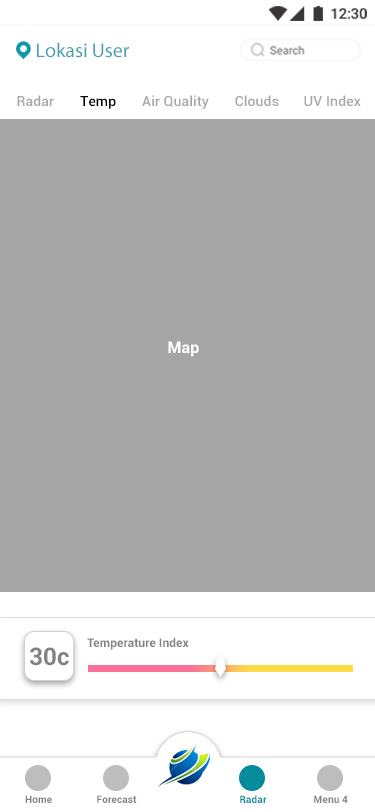
<style>
.page{position:relative;width:375px;height:812px;background:#a5a5a5}
.page>*{position:absolute;margin:0}
.t1{font:20px "MyriadPro-Regular";color:#4aa1ae}
.t2{font:14px "Roboto-Medium";letter-spacing:0.01em;color:#a7a7a7}
.t3{font:14px "Roboto-Medium";letter-spacing:0.01em;color:#000000}
.t4{font:16px "Roboto-Bold";letter-spacing:0.005em;color:#ffffff}
.t5{font:12px "Roboto-Bold";letter-spacing:0.005em;color:#828282}
.t6{font:24.1px "Roboto-Bold";letter-spacing:0.005em;color:#828282}
.t7{font:10px "Roboto-Bold";letter-spacing:0.005em;color:#828282}
.t8{font:10px "Roboto-Bold";letter-spacing:0.005em;color:#088a9d}
</style>
<div class="page">
<p class="t1" style="left:37px;top:42px;width:92px;height:16px">Lokasi User</p>
<p class="t2" style="left:17px;top:95px;width:37px;height:12px">Radar</p>
<p class="t3" style="left:80px;top:96px;width:36px;height:13px">Temp</p>
<p class="t2" style="left:142px;top:95px;width:67px;height:14px">Air Quality</p>
<p class="t2" style="left:235px;top:95px;width:44px;height:12px">Clouds</p>
<p class="t2" style="left:304px;top:95px;width:57px;height:11px">UV Index</p>
<p class="t4" style="left:168px;top:341px;width:31px;height:16px">Map</p>
<p class="t5" style="left:87px;top:637px;width:102px;height:13px">Temperature Index</p>
<p class="t6" style="left:30px;top:647px;width:39px;height:19px">30c</p>
<p class="t7" style="left:25px;top:795px;width:27px;height:8px">Home</p>
<p class="t7" style="left:97px;top:795px;width:40px;height:8px">Forecast</p>
<p class="t8" style="left:240px;top:795px;width:27px;height:8px">Radar</p>
<p class="t7" style="left:314px;top:795px;width:34px;height:8px">Menu 4</p>
</div>
